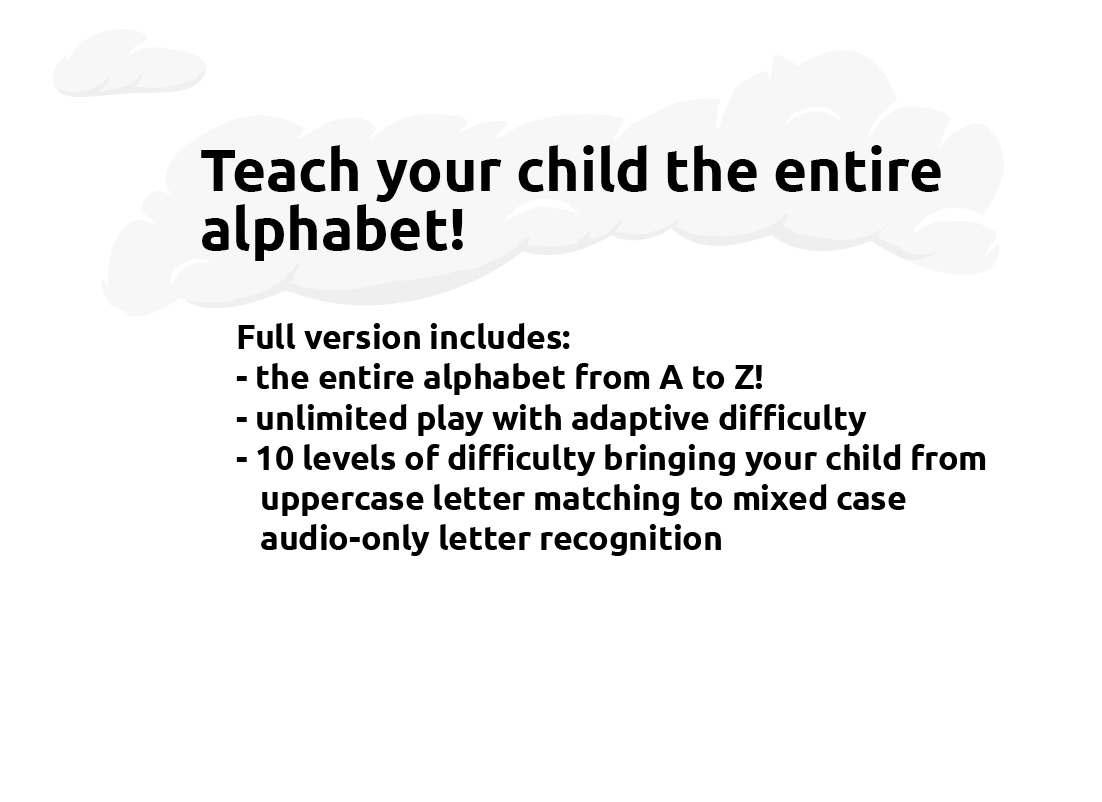
<style>
.page{position:relative;width:1102px;height:802px;background:#ffffff}
.page>*{position:absolute;margin:0}
.t1{font:58.5px/58.5px "Ubuntu-Bold";color:#000000}
.t2{font:33.5px "Ubuntu-Bold";color:#000000}
</style>
<div class="page">
<p class="t1" style="left:201px;top:145px;width:740px;height:116px">Teach your child the entire<br>alphabet!</p>
<p class="t2" style="left:236px;top:323px;width:750px;height:233px">Full version includes:<br>- the entire alphabet from A to Z!<br>- unlimited play with adaptive difficulty<br>- 10 levels of difficulty bringing your child from<br>   uppercase letter matching to mixed case<br>   audio-only letter recognition</p>
</div>
